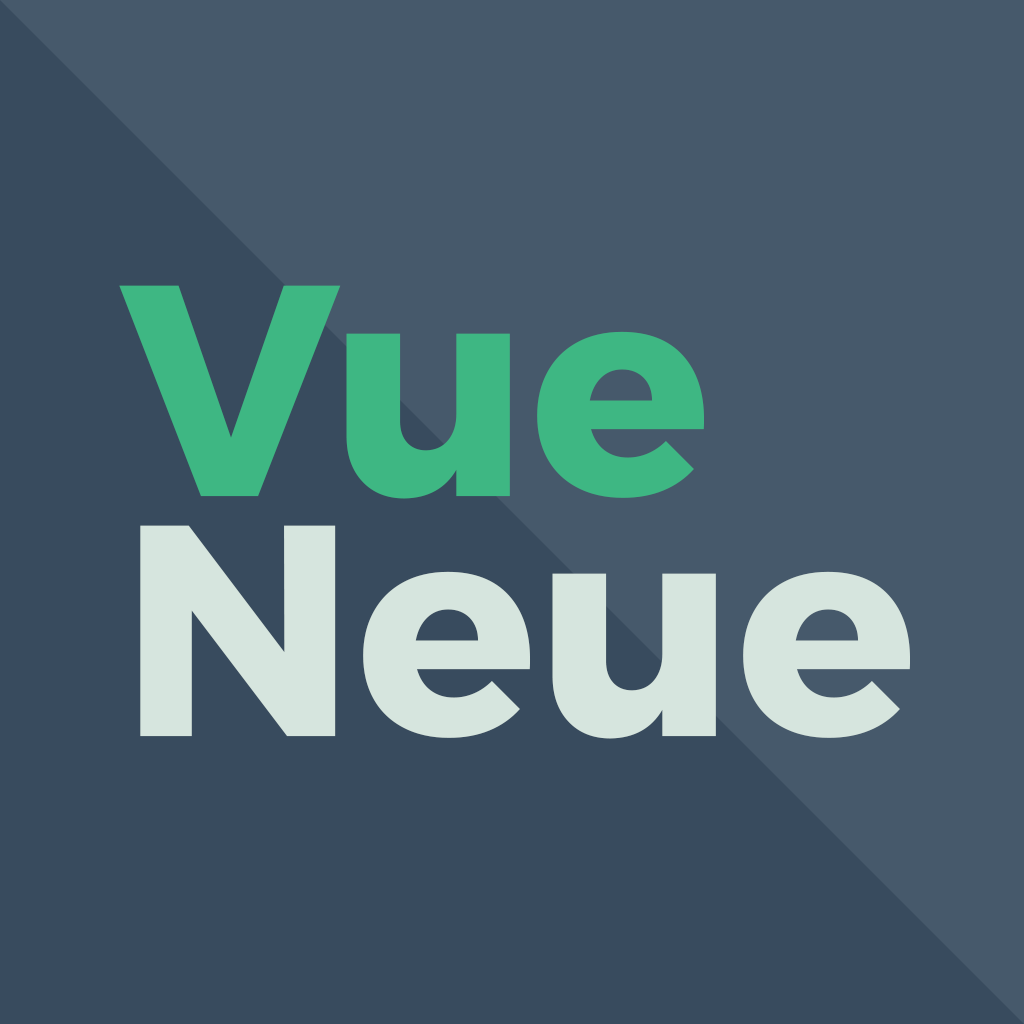
<style>
.page{position:relative;width:1024px;height:1024px;background:#46596b}
.page>*{position:absolute;margin:0}
.t1{font:300px/240px "Montserrat-Bold";color:#d6e5de}
.t2{font:300px/240px "Montserrat-Bold";color:#3eb783}
</style>
<div class="page">
<p class="t1" style="left:119px;top:285px;width:791px;height:454px"><span class="t2">Vue<br></span>Neue</p>
</div>
